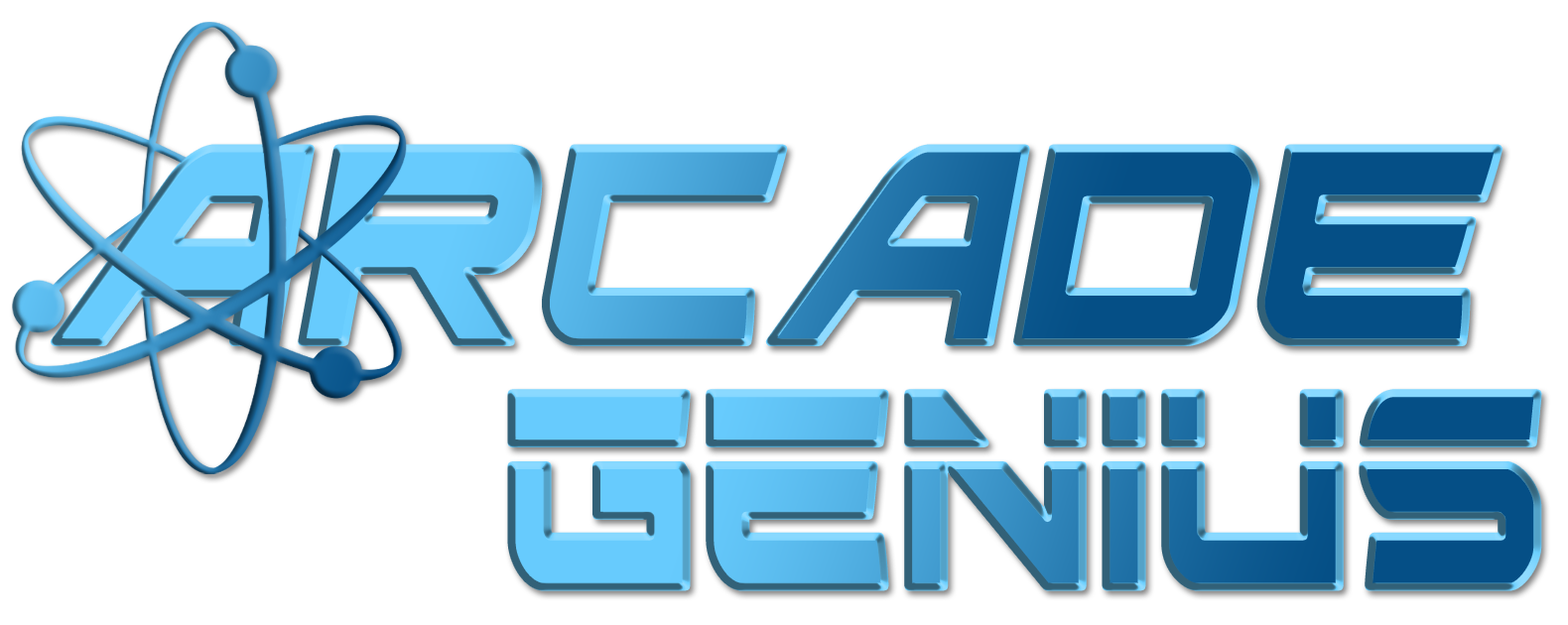
<style>
.page{position:relative;width:1568px;height:625px;background:#ffffff}
.page>*{position:absolute;margin:0}
.t1{font:401.1px "GhostClanExpandedItalic";scale:0.69 1}
.t2{font:401.1px "GhostClanLaser";scale:0.69 1}
</style>
<div class="page">
<p class="t1" style="left:54px;top:148px;width:1445px;height:194px">Arcade</p>
<p class="t2" style="left:511px;top:393px;width:1027px;height:195px">Genius</p>
</div>
